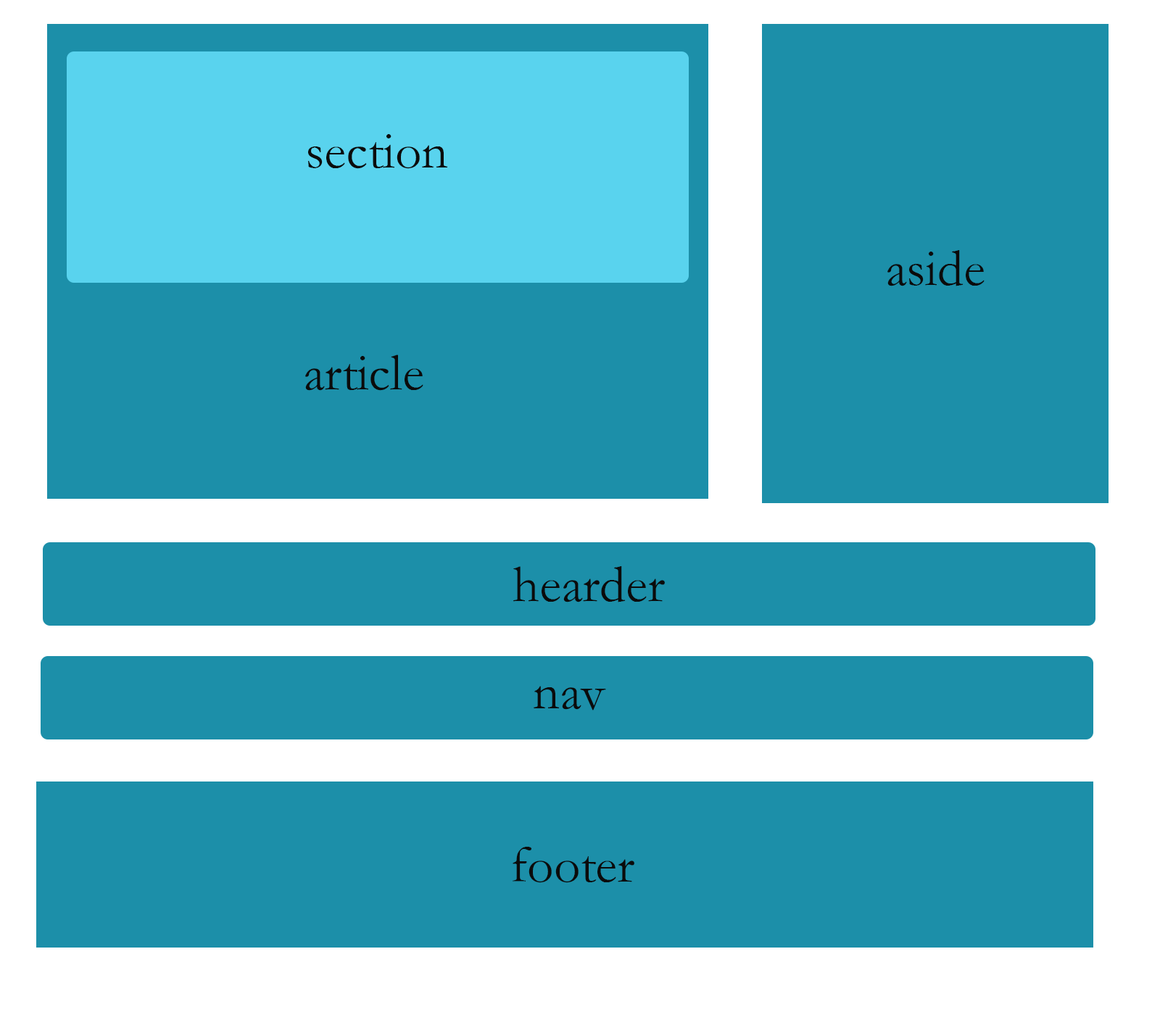
<style>
.page{position:relative;width:1160px;height:1028px;background:#1c8fa9}
.page>*{position:absolute;margin:0}
.t1{font:52.2px "STKaiti";color:#0b0b0b}
</style>
<div class="page">
<p class="t1" style="left:308px;top:134px;width:139px;height:35px">section</p>
<p class="t1" style="left:887px;top:250px;width:98px;height:36px">aside</p>
<p class="t1" style="left:305px;top:355px;width:118px;height:36px">article</p>
<p class="t1" style="left:513px;top:566px;width:152px;height:36px">hearder</p>
<p class="t1" style="left:534px;top:686px;width:72px;height:24px">nav</p>
<p class="t1" style="left:513px;top:847px;width:121px;height:36px">footer</p>
</div>
